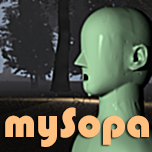
<style>
.page{position:relative;width:152px;height:152px}
.page>*{position:absolute;margin:0}
.t1{font:43px "Bauhaus93";color:#ffc080}
</style>
<div class="page">
<p class="t1" style="left:5px;top:107px;width:144px;height:40px">mySopa</p>
</div>
